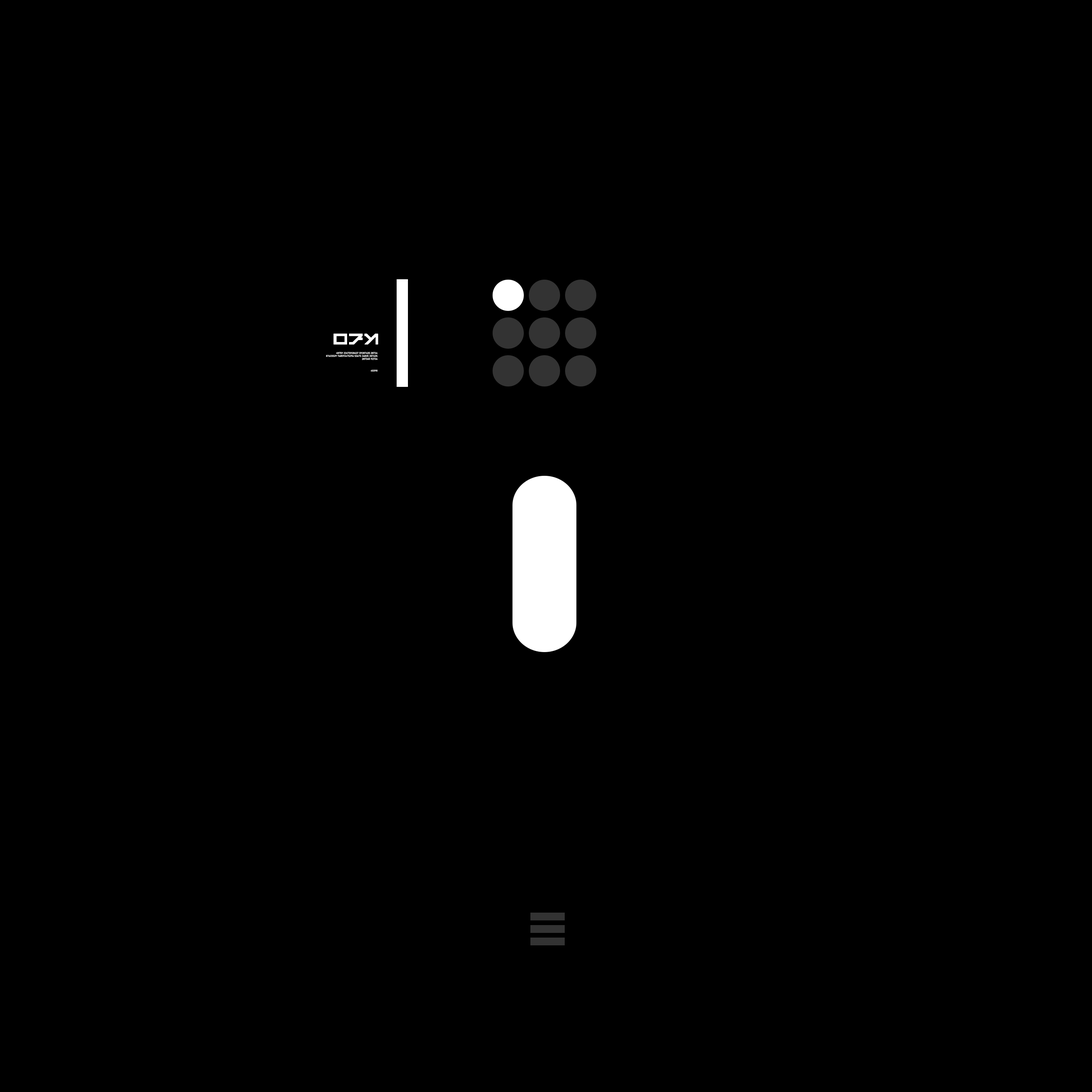
<style>
.page{position:relative;width:1092px;height:1092px;background:#000000}
.page>*{position:absolute;margin:0}
.t1{font:15.8px "Septambres-Neau";color:#ffffff;font-weight:bold}
.t2{font:2.4px "DIN-Regular";color:#ffffff;font-weight:bold}
</style>
<div class="page">
<p class="t1" style="left:333px;top:333px;width:45px;height:12px">sdE</p>
<p class="t2" style="left:326px;top:352px;width:52px;height:20px;text-align:right">48759 23475928437 59287435 28734<br>87423529 748592475294 53475 24835 287435<br>287345 92734<br><br><br><br>45398</p>
</div>
